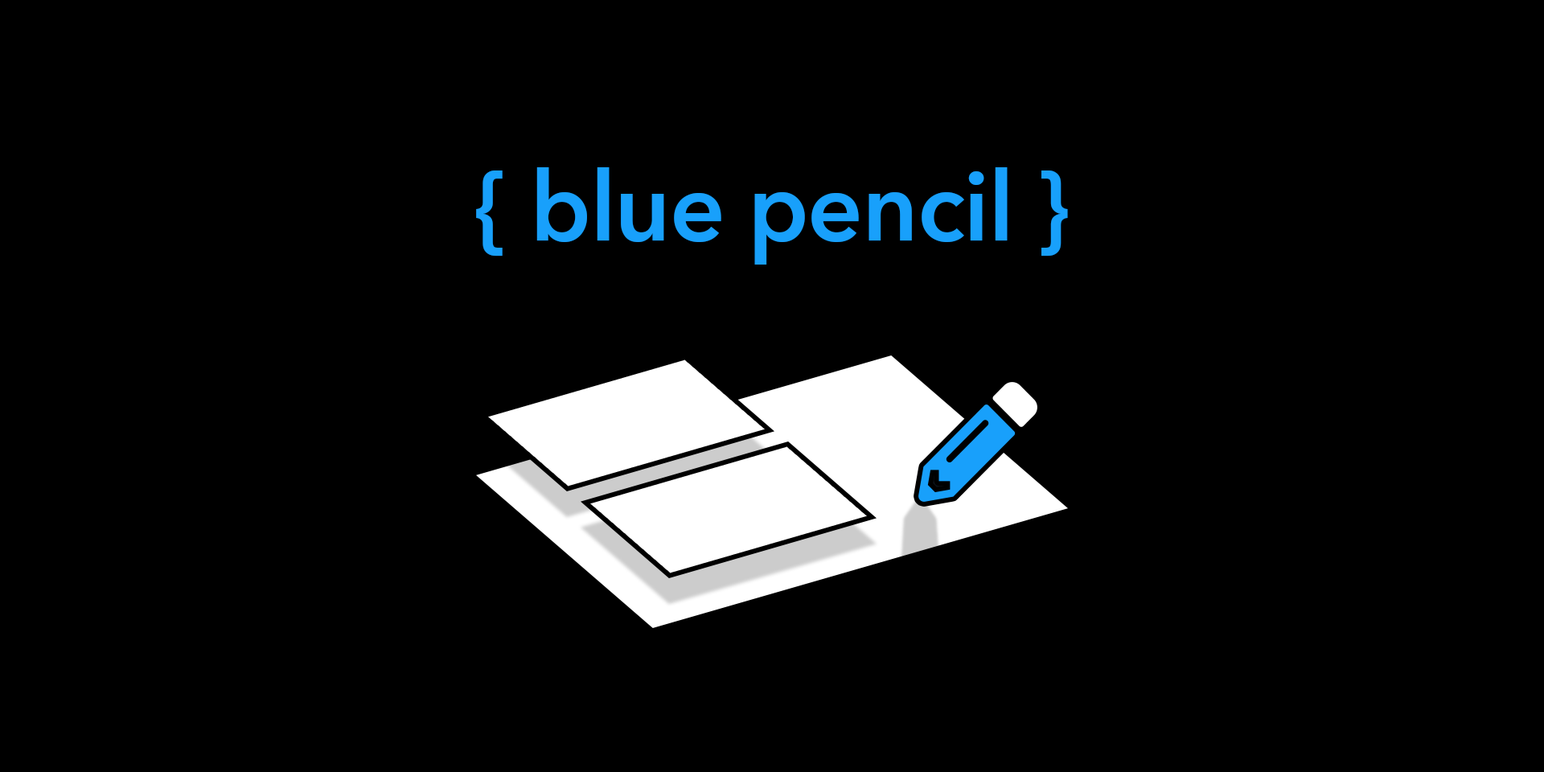
<style>
.page{position:relative;width:1544px;height:772px;background:#000000}
.page>*{position:absolute;margin:0}
.t1{font:96.5px "AvenirNextforSAS-Bold";letter-spacing:-0.01em;color:#18a0fb}
</style>
<div class="page">
<p class="t1" style="left:476px;top:167px;width:592px;height:98px">{ blue pencil }</p>
</div>
